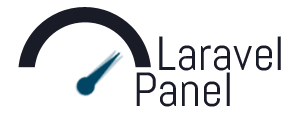
<style>
.page{position:relative;width:300px;height:120px;background:#ffffff}
.page>*{position:absolute;margin:0}
.t1{font:48px "Abel-Regular";color:#191b28}
</style>
<div class="page">
<p class="t1" style="left:159px;top:36px;width:122px;height:35px">Laravel</p>
<p class="t1" style="left:136px;top:72px;width:94px;height:35px">Panel</p>
</div>
